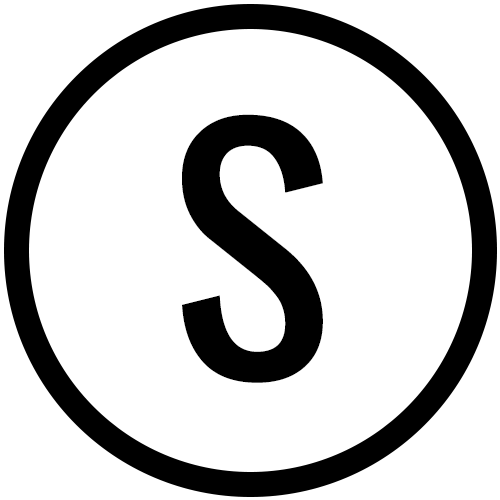
<style>
.page{position:relative;width:500px;height:500px;background:#ffffff}
.page>*{position:absolute;margin:0}
.t1{font:300px "Oswald-Regular";color:#000000}
</style>
<div class="page">
<p class="t1" style="left:182px;top:114px;width:141px;height:269px">S</p>
</div>
